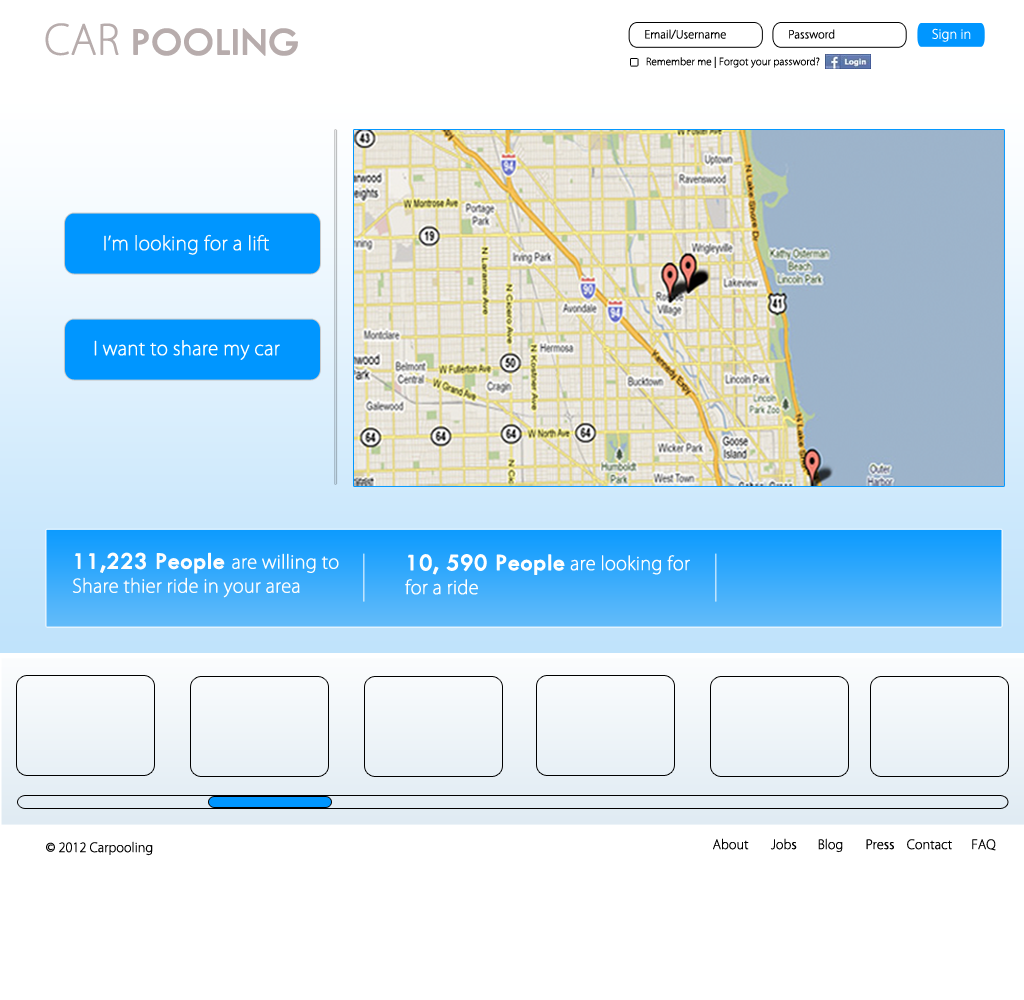
<style>
.page{position:relative;width:1024px;height:1000px;background:#ffffff}
.page>*{position:absolute;margin:0}
.t1{font:39.7px "TwCenMT-Regular";color:#b7acac;font-weight:bold}
.t2{font:39.7px "KozGoPr6N-ExtraLight";color:#b7acac;font-weight:bold}
.t3{font:10.7px "KozGoPr6N-ExtraLight";color:#000000;font-weight:bold}
.t4{font:12.5px "KozGoPr6N-ExtraLight";color:#ffffff;font-weight:bold}
.t5{font:9.6px "KozGoPr6N-ExtraLight";color:#000000;font-weight:bold}
.t6{font:18.4px "KozGoPr6N-ExtraLight";color:#fbfbfb;font-weight:bold}
.t7{font:18.4px "KozGoPr6N-ExtraLight";color:#ffffff;font-weight:bold}
.t8{font:18px/24px "KozGoPr6N-ExtraLight";color:#fdfdfd;font-weight:bold}
.t9{font:24px/24px "TwCenMT-Regular";color:#fdfdfd;font-weight:bold}
.t10{font:18px/24px "KozGoPr6N-ExtraLight";color:#fefefe;font-weight:bold}
.t11{font:24px/24px "TwCenMT-Regular";color:#fefefe;font-weight:bold}
.t12{font:12.4px "KozGoPr6N-ExtraLight";color:#000000;font-weight:bold}
</style>
<div class="page">
<p class="t1" style="left:45px;top:23px;width:253px;height:33px"><span class="t2">CAR </span>POOLING</p>
<p class="t3" style="left:645px;top:29px;width:81px;height:10px">Email/Username</p>
<p class="t3" style="left:789px;top:29px;width:46px;height:10px">Password</p>
<p class="t4" style="left:932px;top:28px;width:39px;height:14px">Sign in</p>
<p class="t5" style="left:646px;top:56px;width:174px;height:12px">Remember me | Forgot your password?</p>
<p class="t6" style="left:104px;top:234px;width:165px;height:21px">I’m looking for a lift</p>
<p class="t7" style="left:94px;top:340px;width:186px;height:20px">I want to share my car</p>
<p class="t8" style="left:72px;top:552px;width:267px;height:46px"><span class="t9">11,223 People </span>are willing to <br>Share thier ride in your area</p>
<p class="t10" style="left:405px;top:554px;width:285px;height:41px"><span class="t11">10, 590 People</span> are looking for <br>for a ride</p>
<p class="t12" style="left:46px;top:841px;width:107px;height:15px">© 2012 Carpooling</p>
<p class="t12" style="left:713px;top:838px;width:283px;height:15px">About       Jobs      Blog       Press   Contact      FAQ</p>
</div>
